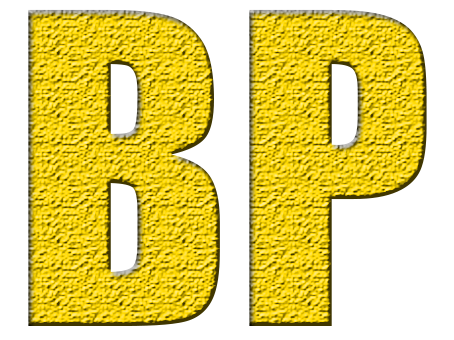
<style>
.page{position:relative;width:454px;height:340px;background:#ffffff}
.page>*{position:absolute;margin:0}
.t1{font:400px "Impact"}
</style>
<div class="page">
<p class="t1" style="left:28px;top:9px;width:399px;height:317px">BP</p>
</div>
